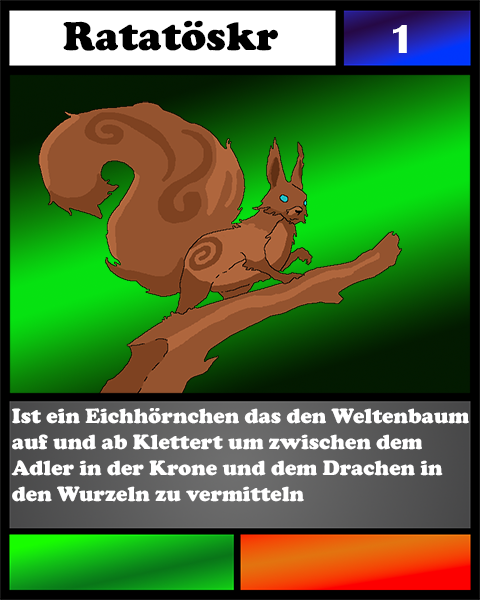
<style>
.page{position:relative;width:480px;height:600px}
.page>*{position:absolute;margin:0}
.t1{font:41.7px "CooperBlack";color:#000000}
.t2{font:41.7px "BritannicBold";color:#ffffff}
.t3{font:21.5px "CooperBlack";color:#ffffff}
</style>
<div class="page">
<p class="t1" style="left:63px;top:20px;width:215px;height:31px">Ratatöskr</p>
<p class="t2" style="left:393px;top:25px;width:14px;height:28px">1</p>
<p class="t3" style="left:11px;top:408px;width:458px;height:94px">Ist ein Eichhörnchen das den Weltenbaum auf und ab Klettert um zwischen dem Adler in der Krone und dem Drachen in den Wurzeln zu vermitteln</p>
</div>
